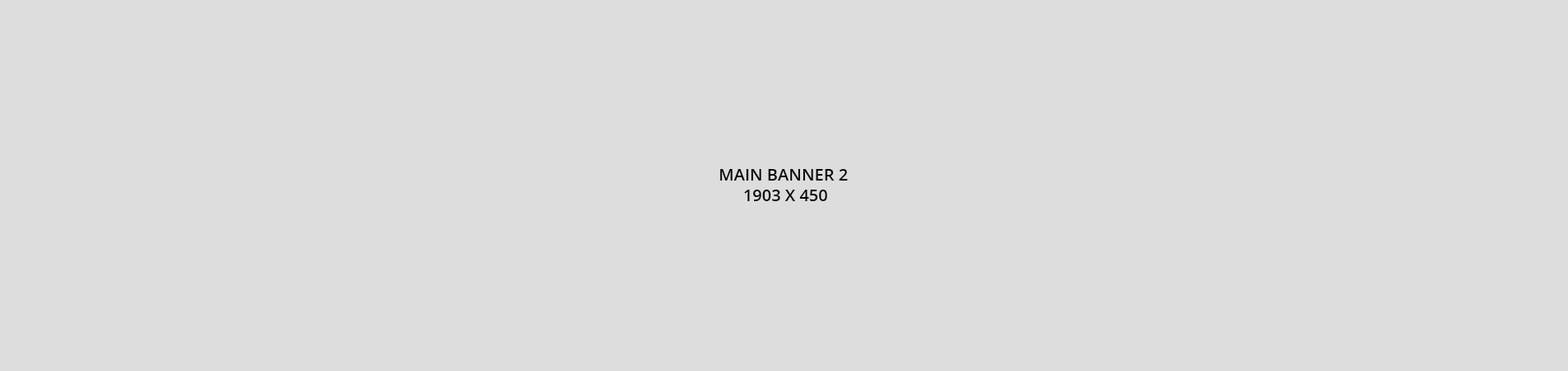
<style>
.page{position:relative;width:1568px;height:371px;background:#dddddd}
.page>*{position:absolute;margin:0}
.t1{font:16.5px/20.6px "OpenSans-Semibold";color:#000000;text-transform:uppercase}
</style>
<div class="page">
<p class="t1" style="left:720px;top:169px;width:128px;height:32px;text-align:center">main banner 2 <br>1903 x 450</p>
</div>
